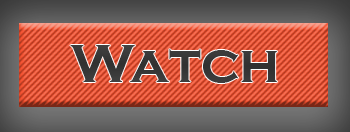
<style>
.page{position:relative;width:350px;height:132px}
.page>*{position:absolute;margin:0}
.t1{font:55.9px "CopperplateGothic-Bold";color:#373737}
</style>
<div class="page">
<p class="t1" style="left:70px;top:45px;width:207px;height:38px">Watch</p>
</div>
